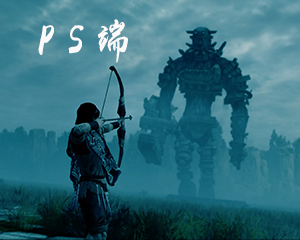
<style>
.page{position:relative;width:300px;height:240px}
.page>*{position:absolute;margin:0}
.t1{font:44.5px "yuweij";letter-spacing:0.3em;color:#fcf9f9;scale:0.79 1}
</style>
<div class="page">
<p class="t1" style="left:38px;top:19px;width:90px;height:44px">PS端</p>
</div>
